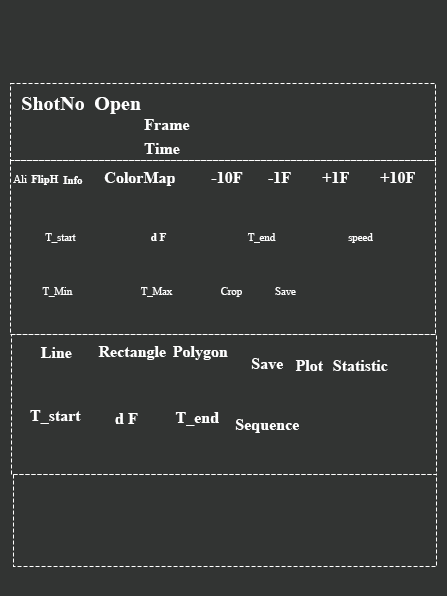
<style>
.page{position:relative;width:447px;height:596px;background:#323433}
.page>*{position:absolute;margin:0}
.t1{font:20px "TimesNewRomanPS-BoldMT";color:#ffffff}
.t2{font:16px "TimesNewRomanPS-BoldMT";color:#ffffff}
.t3{font:10.7px "TimesNewRomanPSMT";color:#ffffff}
.t4{font:10.7px "TimesNewRomanPS-BoldMT";color:#ffffff}
</style>
<div class="page">
<p class="t1" style="left:22px;top:97px;width:62px;height:13px">ShotNo</p>
<p class="t1" style="left:95px;top:97px;width:46px;height:17px">Open</p>
<p class="t2" style="left:144px;top:119px;width:46px;height:11px">Frame</p>
<p class="t2" style="left:144px;top:143px;width:36px;height:11px">Time</p>
<p class="t2" style="left:104px;top:172px;width:71px;height:14px">ColorMap</p>
<p class="t2" style="left:211px;top:172px;width:32px;height:11px">-10F</p>
<p class="t2" style="left:268px;top:172px;width:23px;height:11px">-1F</p>
<p class="t2" style="left:322px;top:172px;width:27px;height:11px">+1F</p>
<p class="t2" style="left:380px;top:172px;width:35px;height:11px">+10F</p>
<p class="t3" style="left:13px;top:175px;width:14px;height:8px">Ali</p>
<p class="t4" style="left:31px;top:175px;width:28px;height:10px">FlipH</p>
<p class="t4" style="left:63px;top:176px;width:20px;height:8px">Info</p>
<p class="t3" style="left:45px;top:233px;width:31px;height:10px">T_start</p>
<p class="t4" style="left:151px;top:233px;width:16px;height:8px">d F</p>
<p class="t3" style="left:247px;top:233px;width:29px;height:10px">T_end</p>
<p class="t3" style="left:348px;top:233px;width:25px;height:10px">speed</p>
<p class="t3" style="left:42px;top:287px;width:31px;height:10px">T_Min</p>
<p class="t3" style="left:140px;top:287px;width:33px;height:10px">T_Max</p>
<p class="t3" style="left:221px;top:287px;width:21px;height:10px">Crop</p>
<p class="t3" style="left:275px;top:287px;width:21px;height:8px">Save</p>
<p class="t2" style="left:40px;top:347px;width:32px;height:11px">Line</p>
<p class="t2" style="left:98px;top:346px;width:68px;height:14px">Rectangle</p>
<p class="t2" style="left:173px;top:346px;width:55px;height:14px">Polygon</p>
<p class="t2" style="left:251px;top:358px;width:32px;height:11px">Save</p>
<p class="t2" style="left:295px;top:360px;width:28px;height:11px">Plot</p>
<p class="t2" style="left:333px;top:360px;width:55px;height:11px">Statistic</p>
<p class="t2" style="left:30px;top:410px;width:51px;height:14px">T_start</p>
<p class="t2" style="left:115px;top:413px;width:23px;height:11px">d F</p>
<p class="t2" style="left:175px;top:412px;width:44px;height:14px">T_end</p>
<p class="t2" style="left:235px;top:419px;width:64px;height:14px">Sequence</p>
</div>
